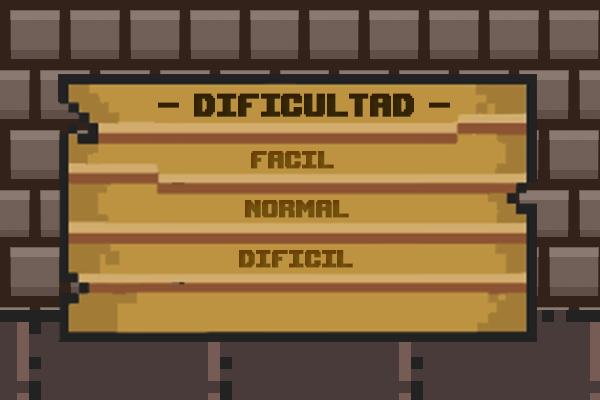
<style>
.page{position:relative;width:600px;height:400px}
.page>*{position:absolute;margin:0}
.t1{font:48px "Upheaval -BRK-";letter-spacing:0.025em;color:#352809;font-weight:bold;scale:0.8 1}
.t2{font:36px "Upheaval -BRK-";letter-spacing:0.025em;color:#715410;font-weight:bold;scale:0.8 1}
</style>
<div class="page">
<p class="t1" style="left:158px;top:93px;width:292px;height:24px">- Dificultad -</p>
<p class="t2" style="left:251px;top:151px;width:83px;height:18px">Facil</p>
<p class="t2" style="left:245px;top:200px;width:104px;height:18px">Normal</p>
<p class="t2" style="left:239px;top:250px;width:114px;height:18px">Dificil</p>
</div>
